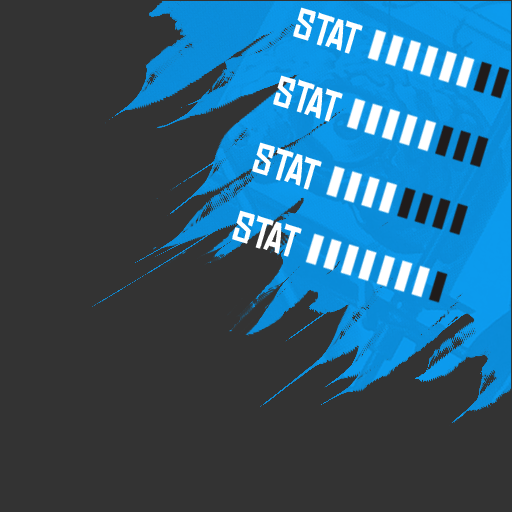
<style>
.page{position:relative;width:512px;height:512px;background:#333333}
.page>*{position:absolute;margin:0}
.t1{font:41.1px/70.7px "ChineseRocksRg-Regular";color:#ffffff}
</style>
<div class="page">
<p class="t1" style="left:232px;top:7px;width:131px;height:250px;text-align:right;rotate:17deg">STAT<br>STAT<br>STAT<br>STAT</p>
</div>
